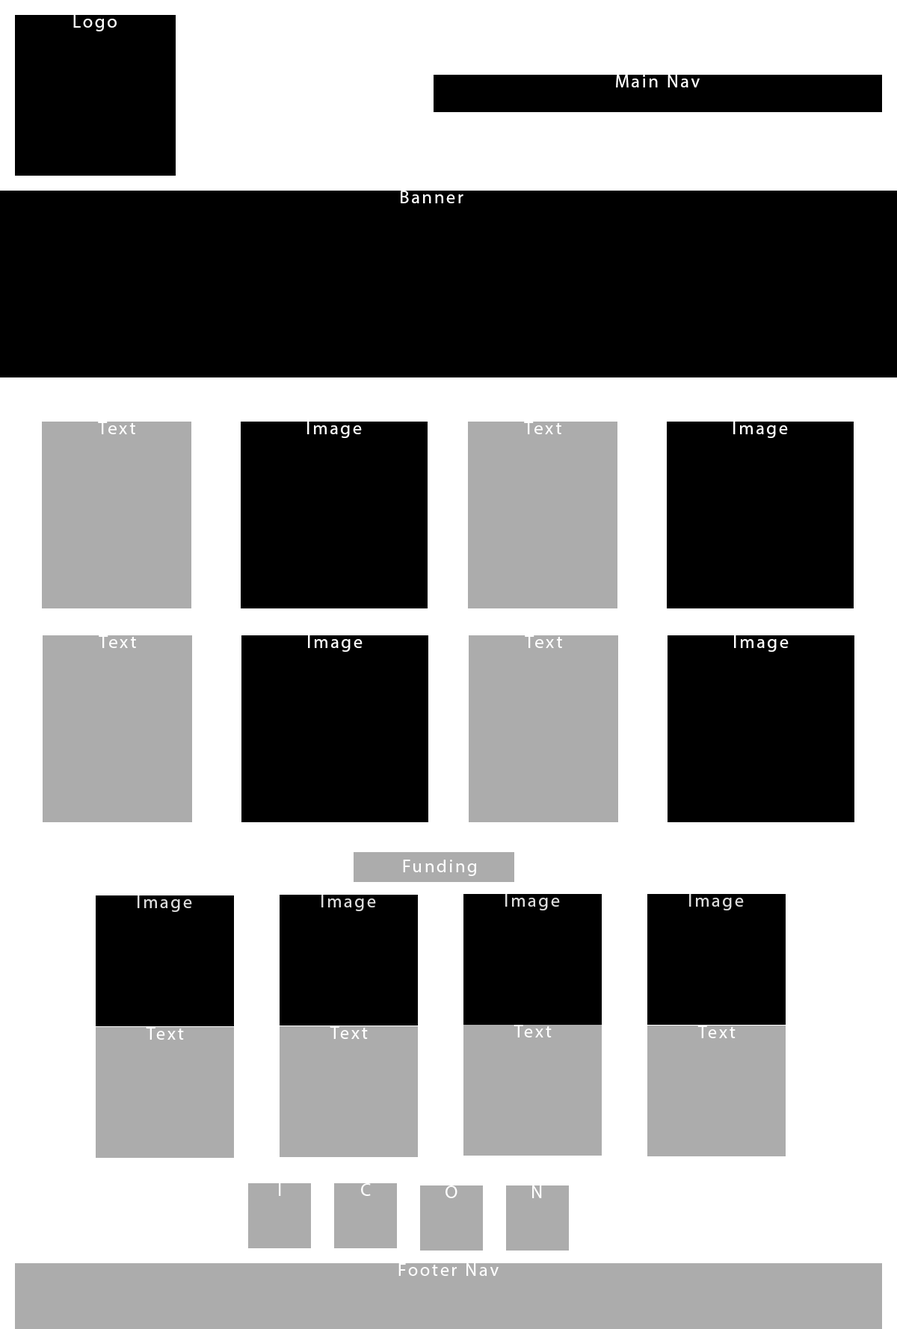
<style>
.page{position:relative;width:897px;height:1329px;background:#ffffff}
.page>*{position:absolute;margin:0}
.t1{font:17.9px "MyriadPro-Regular";letter-spacing:0.12em;color:#ffffff}
.t2{font:17.9px "MyriadPro-Regular";letter-spacing:0.12em;color:#dddddd}
</style>
<div class="page">
<p class="t1" style="left:73px;top:15px;width:44px;height:16px">Logo</p>
<p class="t1" style="left:616px;top:75px;width:84px;height:12px">Main Nav</p>
<p class="t1" style="left:401px;top:191px;width:63px;height:12px">Banner</p>
<p class="t1" style="left:98px;top:422px;width:37px;height:12px">Text</p>
<p class="t1" style="left:307px;top:422px;width:55px;height:16px">Image</p>
<p class="t1" style="left:524px;top:422px;width:37px;height:12px">Text</p>
<p class="t1" style="left:733px;top:422px;width:55px;height:16px">Image</p>
<p class="t1" style="left:99px;top:635px;width:37px;height:13px">Text</p>
<p class="t1" style="left:308px;top:635px;width:55px;height:17px">Image</p>
<p class="t1" style="left:525px;top:635px;width:37px;height:13px">Text</p>
<p class="t1" style="left:734px;top:635px;width:55px;height:17px">Image</p>
<p class="t1" style="left:403px;top:860px;width:73px;height:16px">Funding</p>
<p class="t2" style="left:138px;top:896px;width:54px;height:16px">Image</p>
<p class="t2" style="left:321px;top:895px;width:55px;height:16px">Image</p>
<p class="t2" style="left:505px;top:894px;width:55px;height:17px">Image</p>
<p class="t2" style="left:689px;top:894px;width:55px;height:17px">Image</p>
<p class="t1" style="left:514px;top:1025px;width:38px;height:13px">Text</p>
<p class="t1" style="left:697px;top:1026px;width:39px;height:12px">Text</p>
<p class="t1" style="left:146px;top:1027px;width:38px;height:13px">Text</p>
<p class="t1" style="left:330px;top:1026px;width:38px;height:13px">Text</p>
<p class="t1" style="left:279px;top:1183px;width:2px;height:13px">I</p>
<p class="t1" style="left:361px;top:1183px;width:10px;height:13px">C</p>
<p class="t1" style="left:446px;top:1186px;width:12px;height:12px">O</p>
<p class="t1" style="left:532px;top:1186px;width:10px;height:12px">N</p>
<p class="t1" style="left:398px;top:1263px;width:101px;height:13px">Footer Nav</p>
</div>
